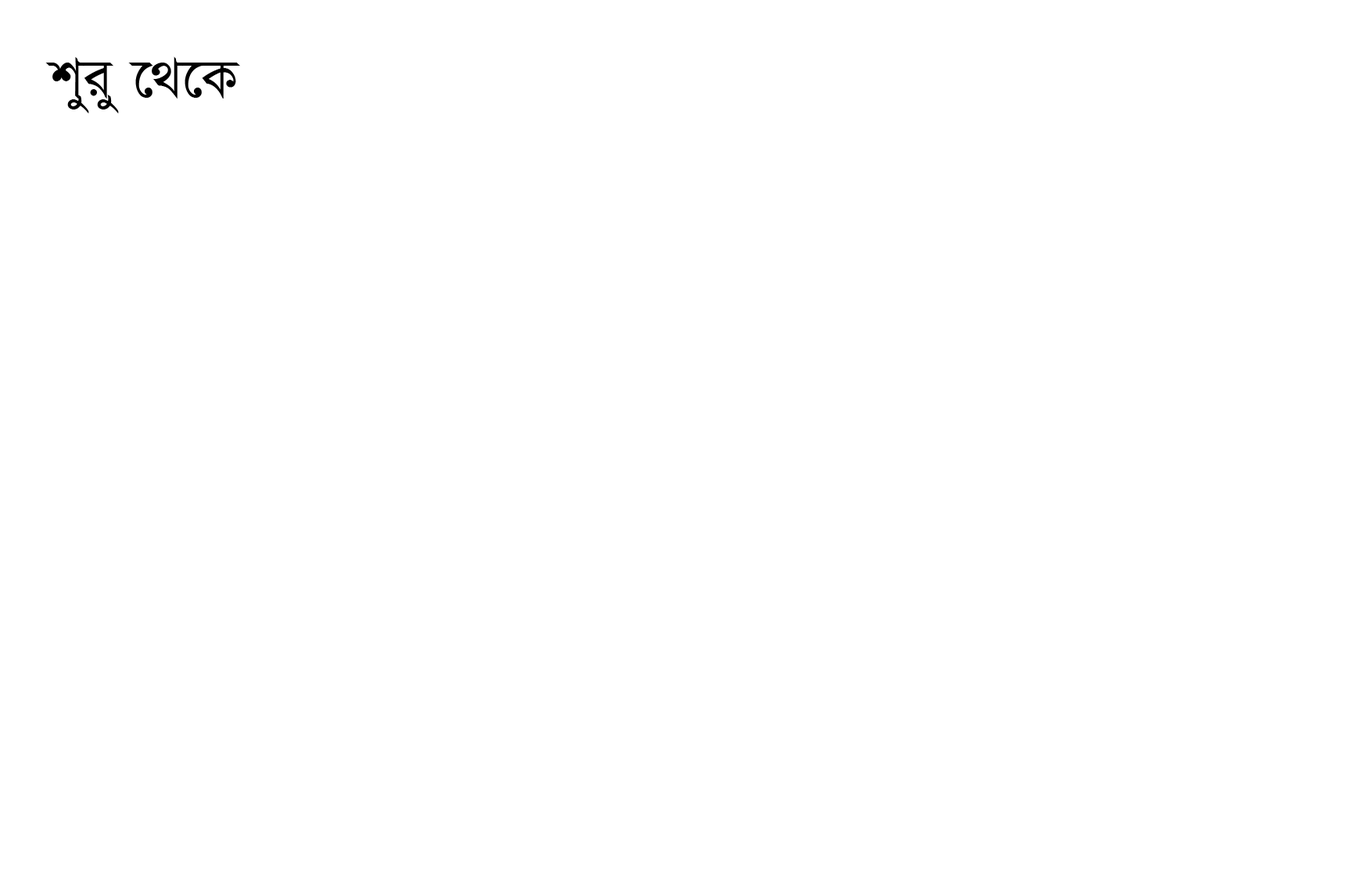
<style>
.page{position:relative;width:1356px;height:879px;background:#ffffff}
.page>*{position:absolute;margin:0}
.t1{font:56.3px "Kalpurush";color:#000000}
</style>
<div class="page">
<p class="t1" style="left:45px;top:56px;width:195px;height:57px">শুরু েথেক</p>
</div>
